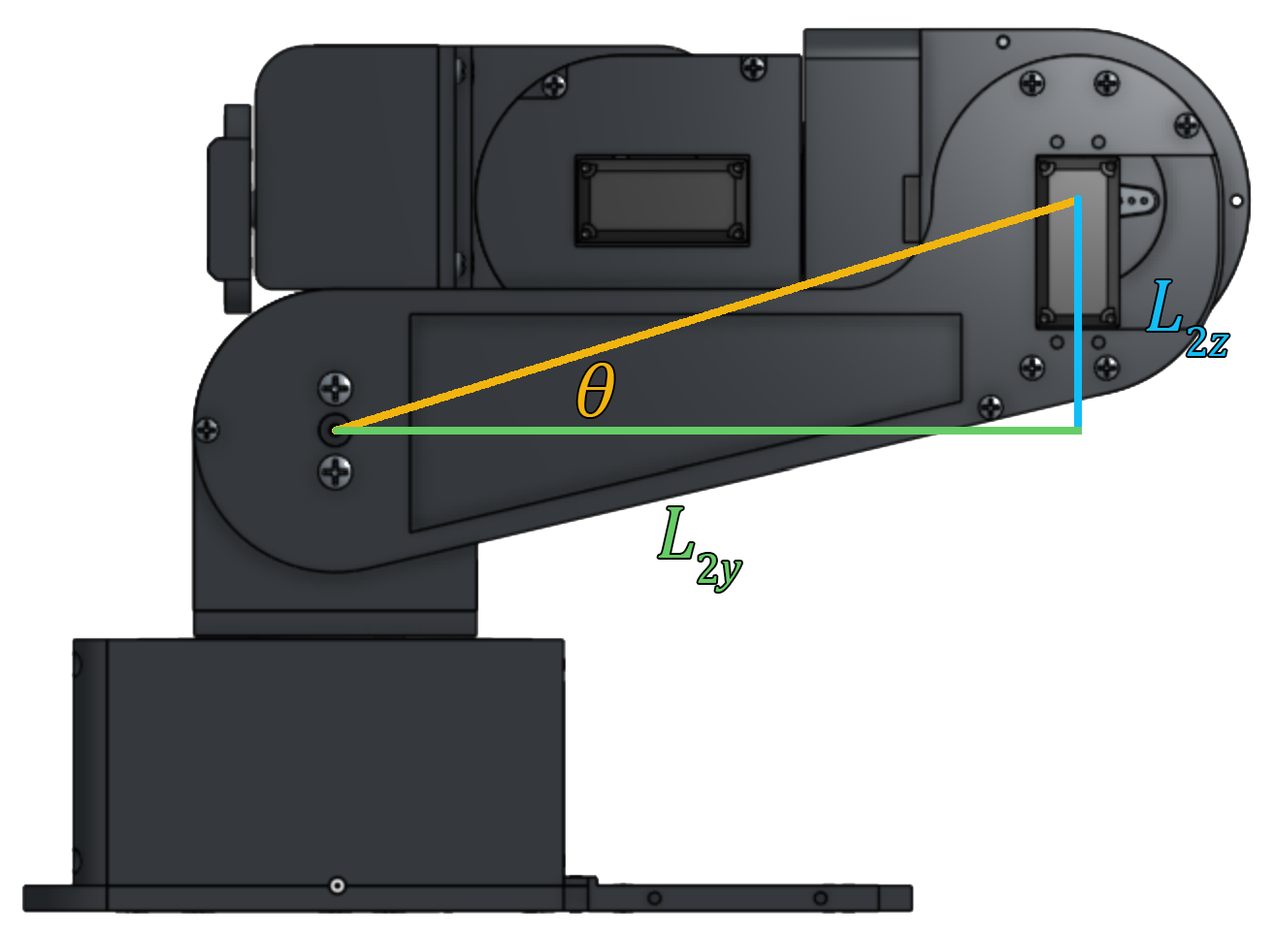
<style>
.page{position:relative;width:1275px;height:935px;background:#ffffff}
.page>*{position:absolute;margin:0}
.t1{font:75.6px "Cambria-Italic";color:#13bdf5}
.t2{font:75.6px "Cambria";color:#13bdf5}
.t3{font:75.6px "Cambria-Italic";color:#f2b50f}
.t4{font:75.6px "Cambria-Italic";color:#66cc66}
.t5{font:75.6px "Cambria";color:#66cc66}
</style>
<div class="page">
<p class="t1" style="left:1146px;top:280px;width:83px;height:76px">L<span class="t2">2</span>z</p>
<p class="t3" style="left:577px;top:363px;width:37px;height:54px">θ</p>
<p class="t4" style="left:658px;top:507px;width:83px;height:85px">L<span class="t5">2</span>y</p>
</div>
